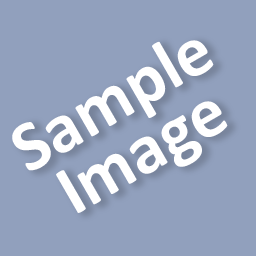
<style>
.page{position:relative;width:256px;height:256px;background:#91a0bd}
.page>*{position:absolute;margin:0}
.t1{font:72px/60px "Calibri-Bold";color:#ffffff}
</style>
<div class="page">
<p class="t1" style="left:12px;top:40px;width:216px;height:173px;text-align:center;rotate:-30deg">Sample<br>Image</p>
</div>
